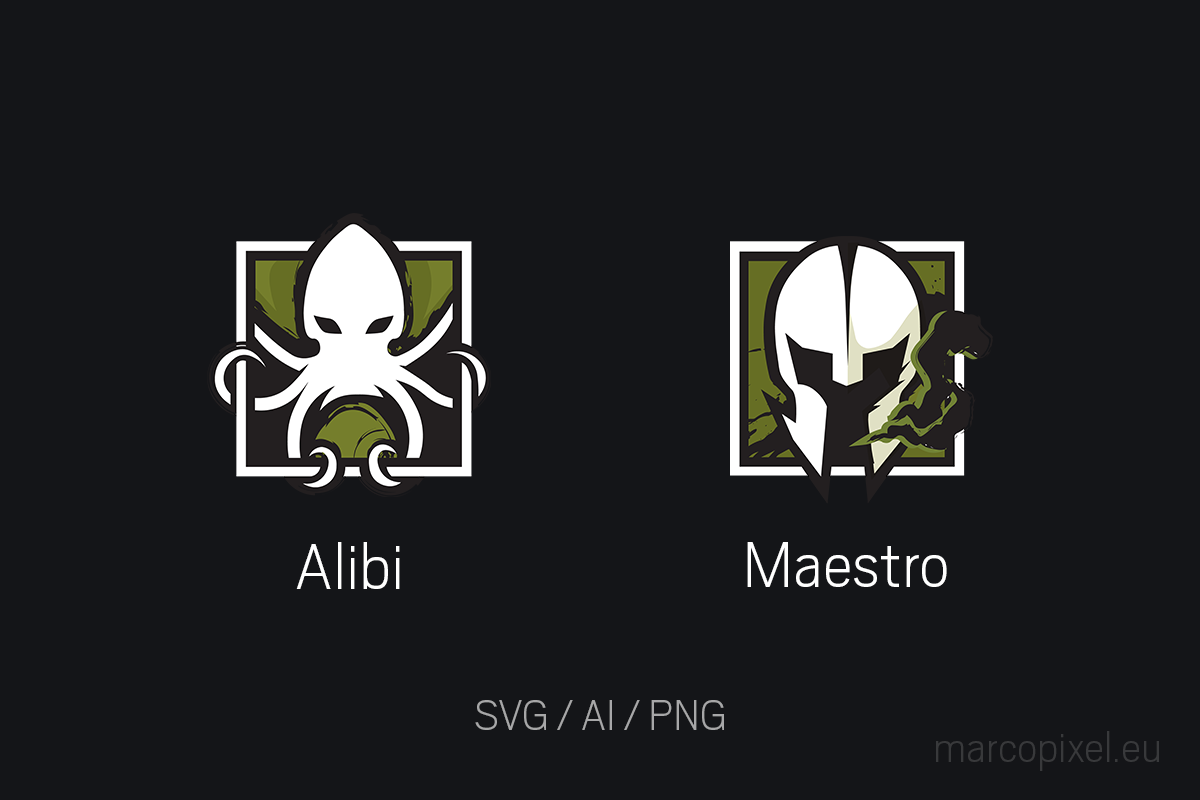
<style>
.page{position:relative;width:1200px;height:800px;background:#141518}
.page>*{position:absolute;margin:0}
.t1{font:72px "Scout-ExtraLight";color:#ffffff}
.t2{font:48px "Scout-ExtraLight";color:#a7a7a8}
.t3{font:48px "Scout-ExtraLight";color:#38393b}
</style>
<div class="page">
<p class="t1" style="left:296px;top:542px;width:104px;height:47px">Alibi</p>
<p class="t1" style="left:747px;top:542px;width:200px;height:45px">Maestro</p>
<p class="t2" style="left:475px;top:700px;width:249px;height:30px">SVG / AI / PNG</p>
<p class="t3" style="left:936px;top:731px;width:223px;height:40px">marcopixel.eu</p>
</div>
